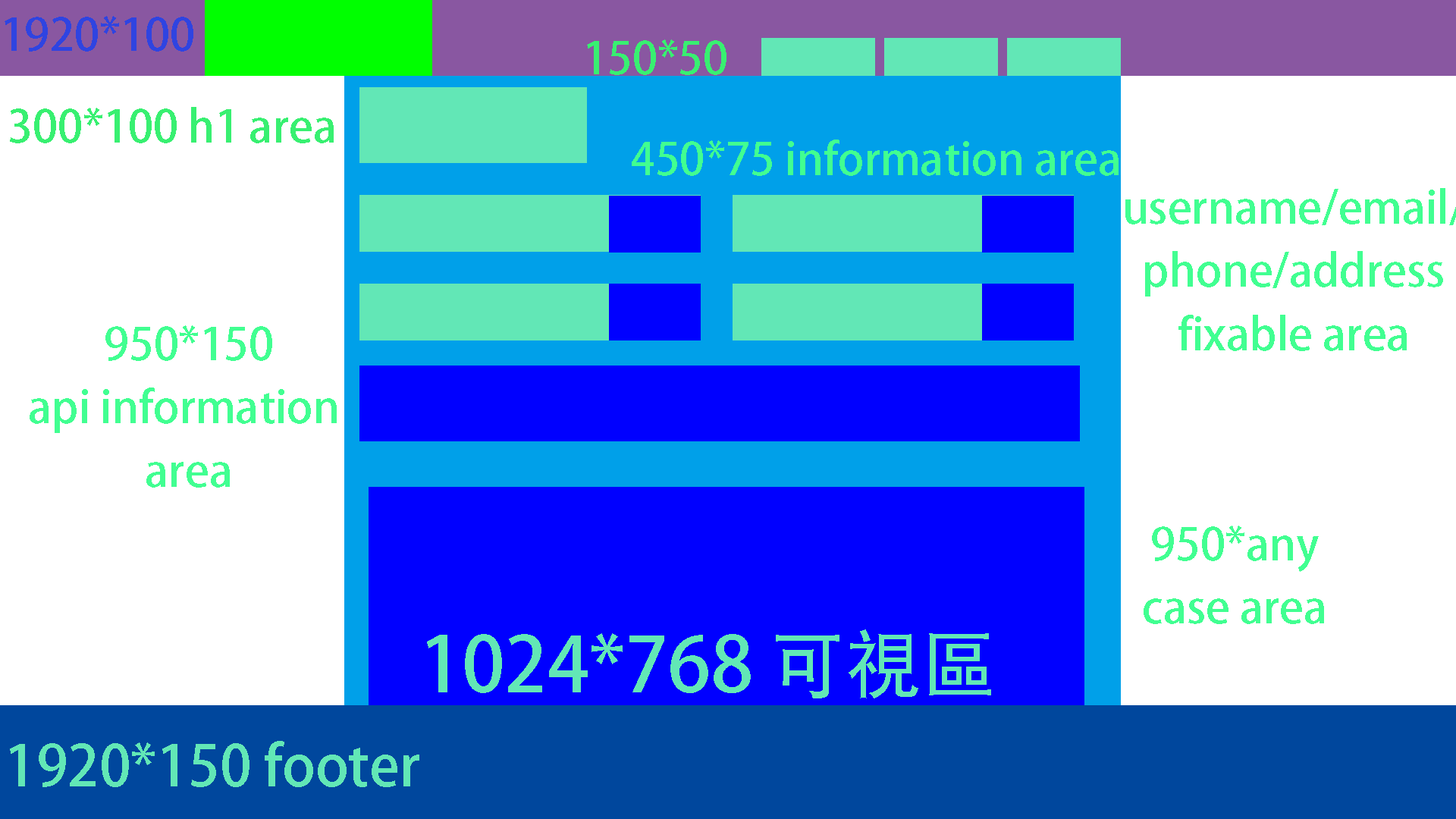
<style>
.page{position:relative;width:1456px;height:819px;background:#ffffff}
.page>*{position:absolute;margin:0}
.t1{font:44.2px "AdobeHeitiStd-Regular";color:#2f44e1}
.t2{font:44.2px "AdobeHeitiStd-Regular";color:#38f071}
.t3{font:44.2px "AdobeHeitiStd-Regular";color:#41ff91}
.t4{font:44.2px/63.2px "AdobeHeitiStd-Regular";color:#41ff91}
.t5{font:75.8px "AdobeHeitiStd-Regular";color:#62e7b6}
.t6{font:56px "AdobeHeitiStd-Regular";color:#62e7b6}
</style>
<div class="page">
<p class="t1" style="left:5px;top:16px;width:188px;height:36px">1920*100</p>
<p class="t2" style="left:587px;top:39px;width:139px;height:36px">150*50</p>
<p class="t2" style="left:10px;top:107px;width:324px;height:36px">300*100 h1 area</p>
<p class="t3" style="left:632px;top:140px;width:487px;height:36px">450*75 information area</p>
<p class="t4" style="left:30px;top:325px;width:307px;height:163px;text-align:center">950*150<br>api information <br>area</p>
<p class="t4" style="left:1144px;top:526px;width:180px;height:98px;text-align:center">950*any<br>case area</p>
<p class="t5" style="left:427px;top:629px;width:564px;height:69px">1024*768 可視區</p>
<p class="t6" style="left:10px;top:741px;width:409px;height:46px">1920*150 footer</p>
</div>
